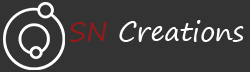
<style>
.page{position:relative;width:250px;height:72px;background:#333333}
.page>*{position:absolute;margin:0}
.t1{font:26.6px "SegoePrint";color:#ffffff}
.t2{font:26.6px "SegoePrint";color:#951919}
</style>
<div class="page">
<p class="t1" style="left:70px;top:20px;width:174px;height:22px"><span class="t2">SN </span>Creations</p>
</div>
